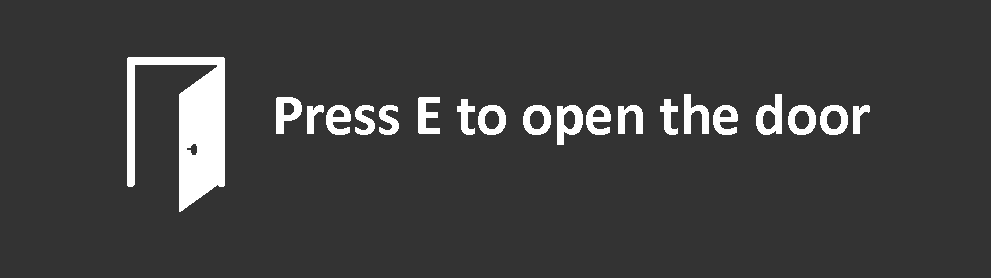
<style>
.page{position:relative;width:991px;height:278px;background:#333333}
.page>*{position:absolute;margin:0}
.t1{font:59px "Calibri-Bold";color:#ffffff}
</style>
<div class="page">
<p class="t1" style="left:276px;top:94px;width:594px;height:51px">Press E to open the door</p>
</div>
